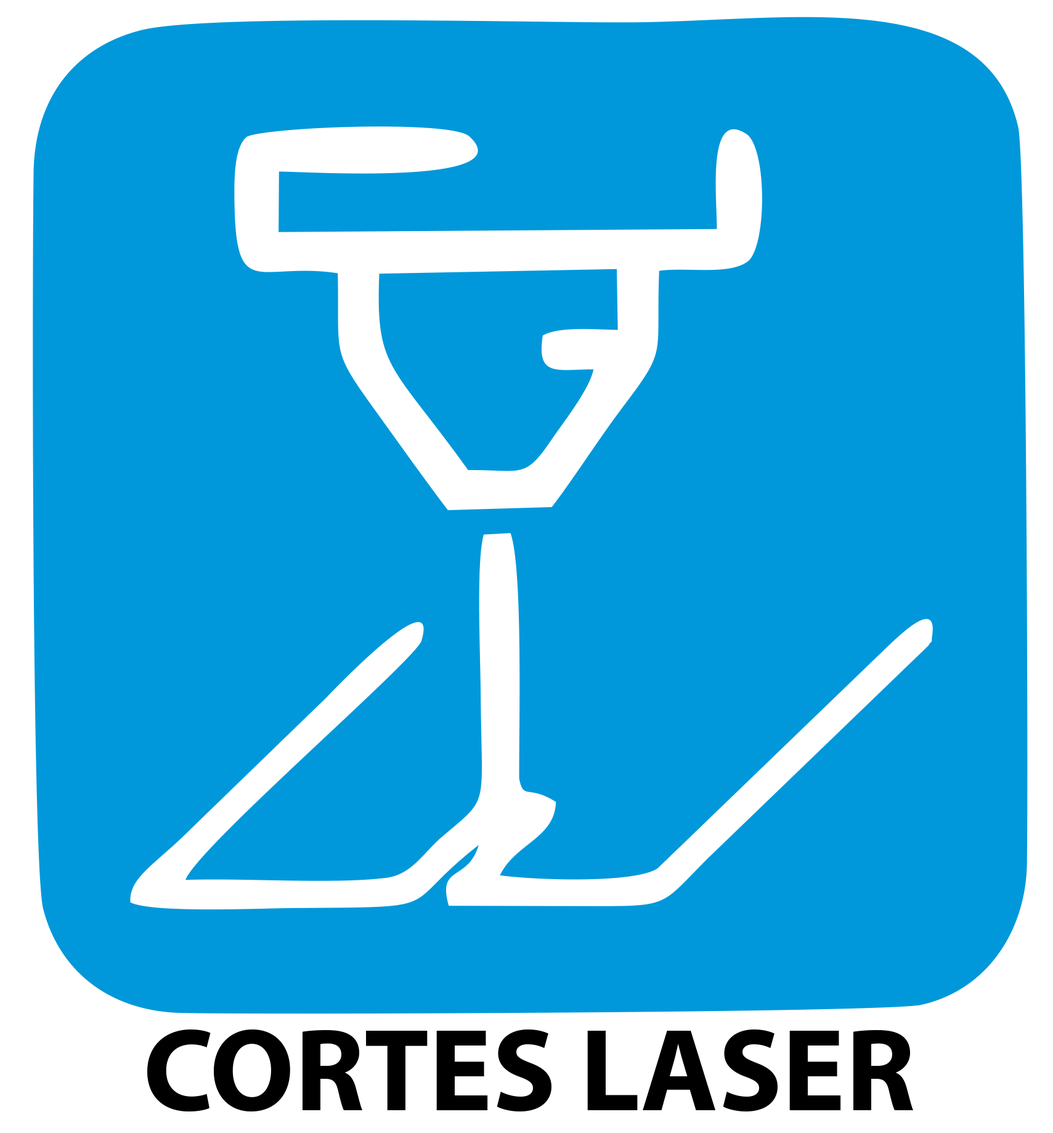
<style>
.page{position:relative;width:1053px;height:1133px;background:#0098da}
.page>*{position:absolute;margin:0}
.t1{font:118.1px "MyriadPro-Bold";color:#000000}
</style>
<div class="page">
<p class="t1" style="left:147px;top:1029px;width:766px;height:83px">CORTES LASER</p>
</div>
